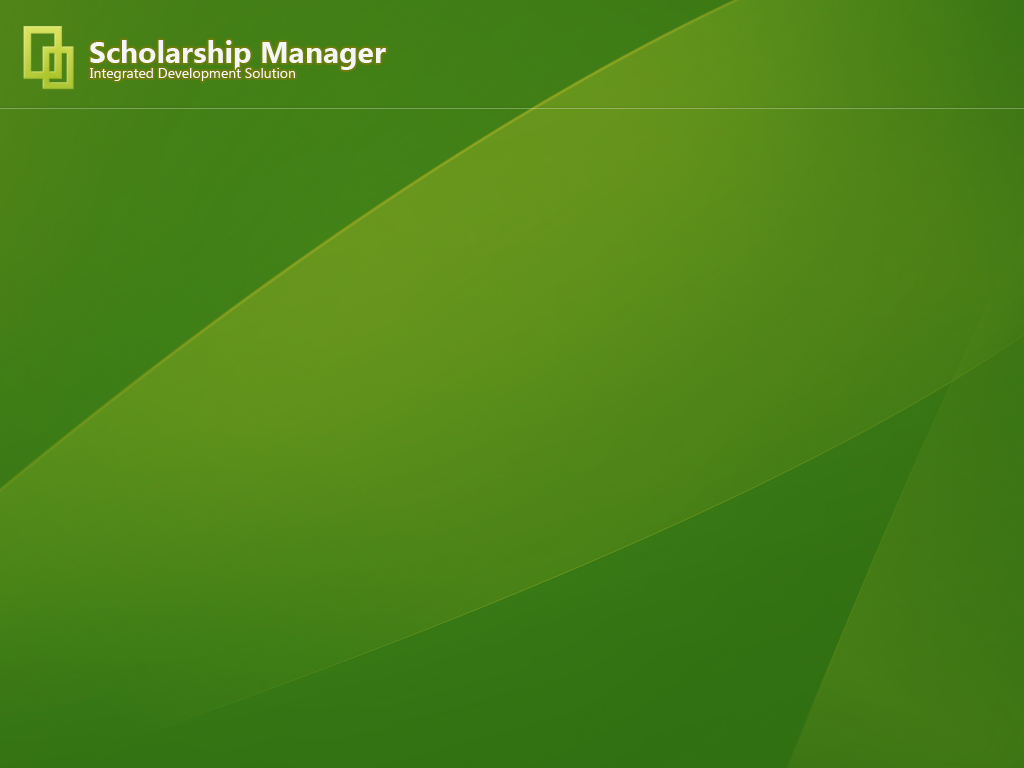
<style>
.page{position:relative;width:1024px;height:768px}
.page>*{position:absolute;margin:0}
.t1{font:30px "SegoeUI-Bold";color:#f4f5f8}
.t2{font:14px "SegoeUI";color:#f4f5f8}
</style>
<div class="page">
<p class="t1" style="left:90px;top:40px;width:296px;height:30px">Scholarship Manager</p>
<p class="t2" style="left:90px;top:68px;width:205px;height:13px">Integrated Development Solution</p>
</div>
